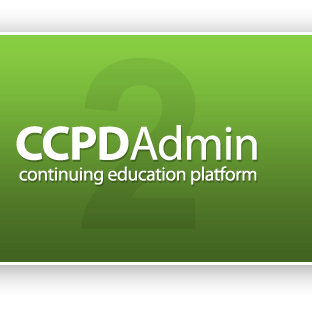
<style>
.page{position:relative;width:312px;height:315px}
.page>*{position:absolute;margin:0}
.t1{font:48.4px "MyriadPro-Regular";letter-spacing:-0.02em;color:#ffffff}
.t2{font:48.4px "MyriadPro-Bold";letter-spacing:-0.02em;color:#ffffff}
.t3{font:19.5px "MyriadPro-Regular";letter-spacing:-0.02em;color:#ffffff}
</style>
<div class="page">
<p class="t1" style="left:16px;top:125px;width:241px;height:36px"><span class="t2">CCPD</span>Admin</p>
<p class="t3" style="left:19px;top:166px;width:238px;height:19px">continuing education platform</p>
</div>
